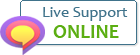
<style>
.page{position:relative;width:140px;height:55px;background:#ffffff}
.page>*{position:absolute;margin:0}
.t1{font:16px "Candara";color:#40738b}
.t2{font:20px "Candara-Bold";color:#5bae12}
</style>
<div class="page">
<p class="t1" style="left:43px;top:7px;width:85px;height:14px">Live Support</p>
<p class="t2" style="left:53px;top:25px;width:66px;height:13px">ONLINE</p>
</div>
